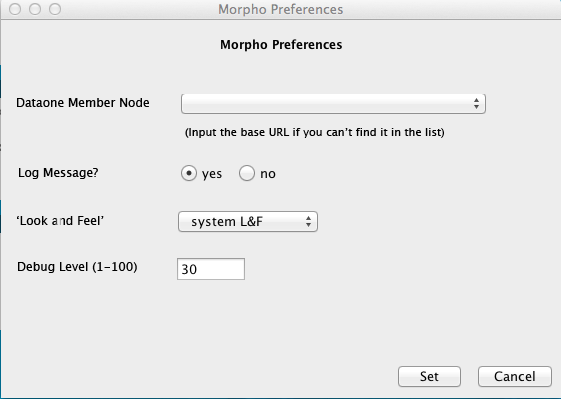
<style>
.page{position:relative;width:561px;height:399px;background:#ededed}
.page>*{position:absolute;margin:0}
.t1{font:12px "LucidaGrande";color:#000000}
.t2{font:11px "LucidaGrande";color:#000000}
</style>
<div class="page">
<p class="t1" style="left:17px;top:98px;width:132px;height:9px">Dataone Member Node</p>
<p class="t2" style="left:185px;top:128px;width:259px;height:10px">(Input the base URL if you can’t find it in the list)</p>
<p class="t1" style="left:19px;top:168px;width:79px;height:11px">Log Message?</p>
<p class="t1" style="left:17px;top:216px;width:87px;height:9px">‘Look and Feel’</p>
<p class="t1" style="left:18px;top:262px;width:119px;height:11px">Debug Level (1-100)</p>
</div>
